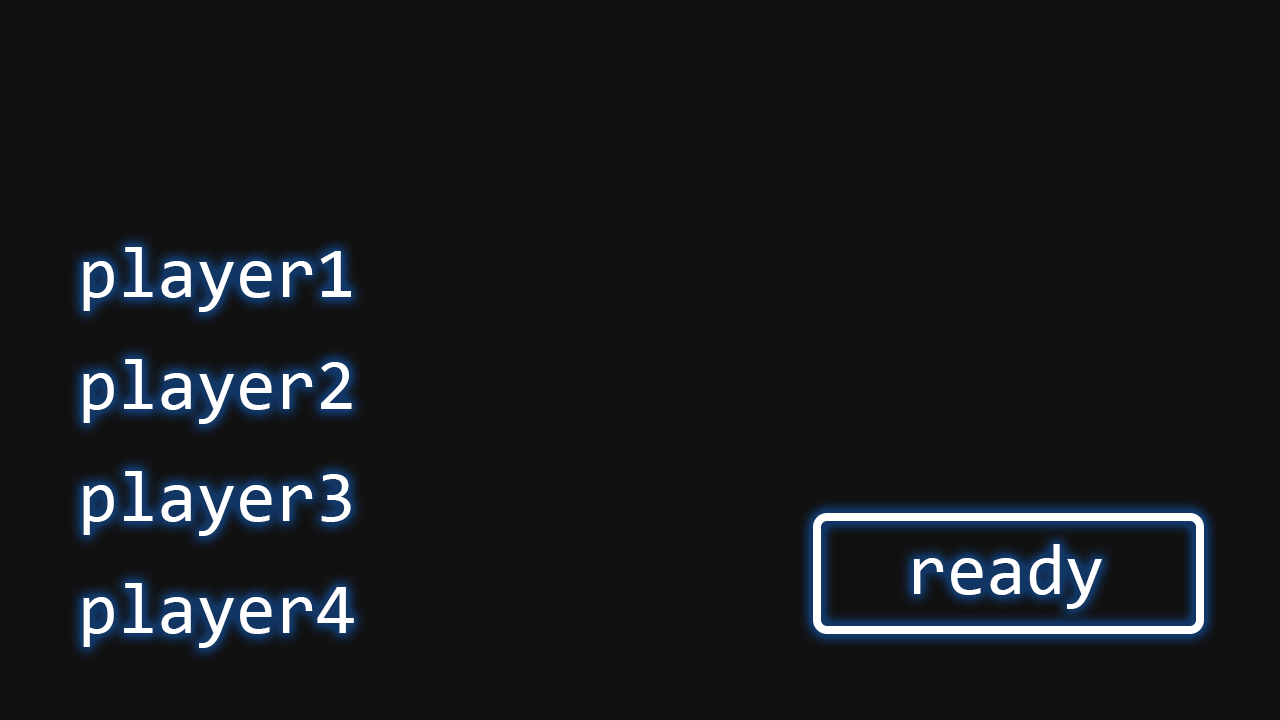
<style>
.page{position:relative;width:1280px;height:720px;background:#111111}
.page>*{position:absolute;margin:0}
.t1{font:72px "Consolas";color:#ffffff}
</style>
<div class="page">
<p class="t1" style="left:83px;top:247px;width:268px;height:65px">player1</p>
<p class="t1" style="left:83px;top:359px;width:269px;height:65px">player2</p>
<p class="t1" style="left:83px;top:471px;width:268px;height:65px">player3</p>
<p class="t1" style="left:914px;top:544px;width:188px;height:65px">ready</p>
<p class="t1" style="left:83px;top:583px;width:271px;height:65px">player4</p>
</div>
